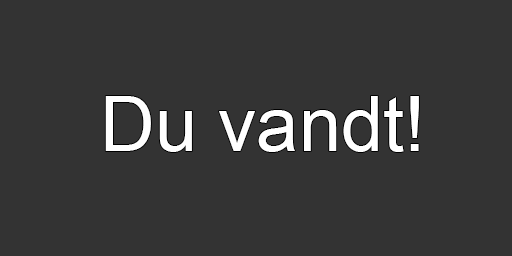
<style>
.page{position:relative;width:512px;height:256px;background:#333333}
.page>*{position:absolute;margin:0}
.t1{font:76px "ArialMT";color:#ffffff}
</style>
<div class="page">
<p class="t1" style="left:105px;top:96px;width:314px;height:56px">Du vandt!</p>
</div>
